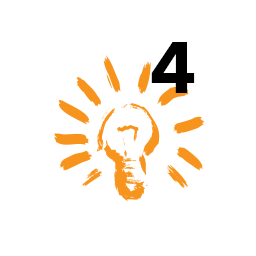
<style>
.page{position:relative;width:256px;height:256px;background:#ffffff}
.page>*{position:absolute;margin:0}
.t1{font:72px "AvenirNext-Bold";color:#000000}
</style>
<div class="page">
<p class="t1" style="left:151px;top:42px;width:44px;height:51px">4</p>
</div>
